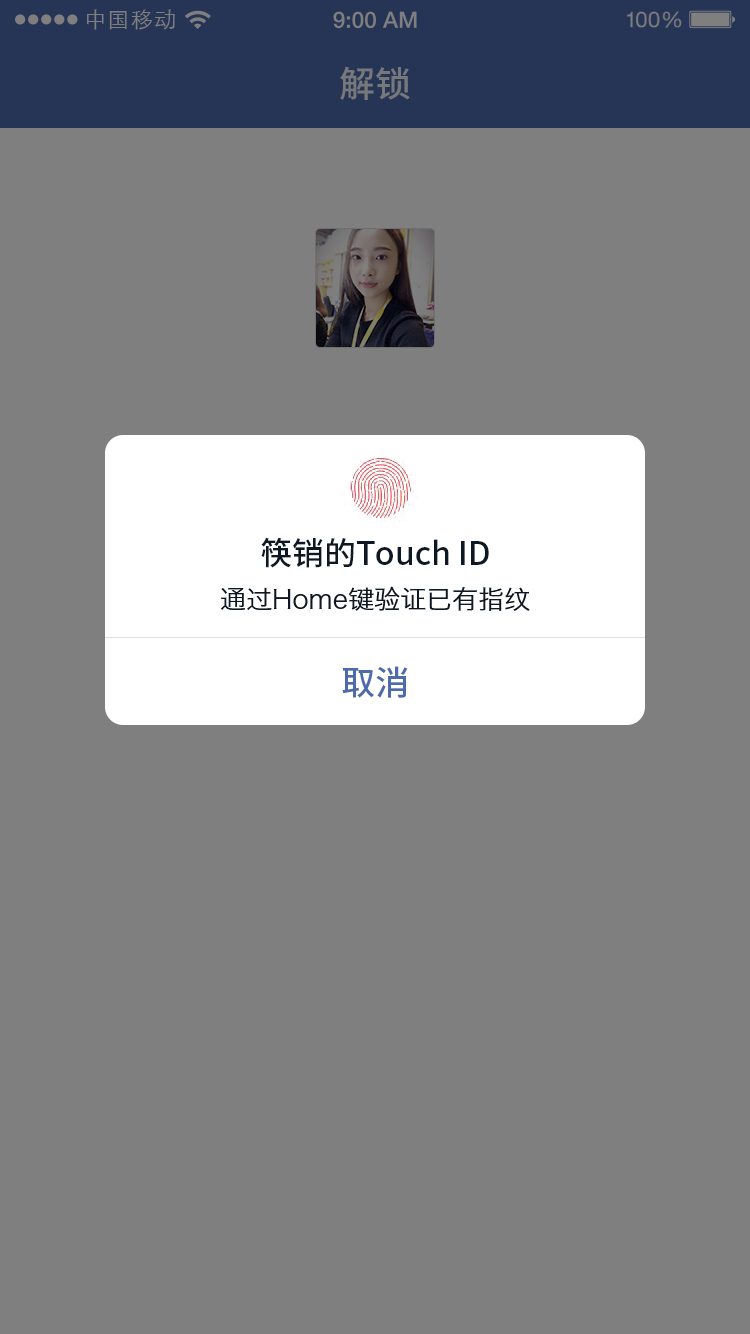
<style>
.page{position:relative;width:750px;height:1334px;background:#7f7f7f}
.page>*{position:absolute;margin:0}
.t1{font:21.9px "STXihei";letter-spacing:0.04em;color:#7f7f7f}
.t2{font:36px "NotoSansHans-Medium";color:#77787b}
.t3{font:32px "NotoSansHans-Medium";color:#0e1724}
.t4{font:26px "HiraginoSansGB-W3";color:#0e1724}
.t5{font:34px "NotoSansHans-Medium";color:#4d6bab}
</style>
<div class="page">
<p class="t1" style="left:86px;top:9px;width:89px;height:21px">中国移动</p>
<p class="t2" style="left:340px;top:66px;width:70px;height:34px">解锁</p>
<p class="t3" style="left:261px;top:537px;width:228px;height:31px">筷销的Touch ID</p>
<p class="t4" style="left:220px;top:586px;width:310px;height:25px">通过Home键验证已有指纹</p>
<p class="t5" style="left:342px;top:666px;width:66px;height:32px">取消</p>
</div>
